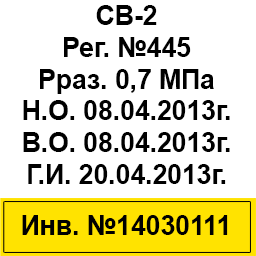
<style>
.page{position:relative;width:256px;height:256px;background:#ffffff}
.page>*{position:absolute;margin:0}
.t1{font:26.5px "Arial-BoldMT";color:#000000}
</style>
<div class="page">
<p class="t1" style="left:23px;top:5px;width:207px;height:179px;text-align:center">СВ-2<br>Рег. №445<br>Рраз. 0,7 МПа<br>Н.О. 08.04.2013г.<br>В.О. 08.04.2013г.<br>Г.И. 20.04.2013г.</p>
<p class="t1" style="left:22px;top:215px;width:206px;height:20px">Инв. №14030111</p>
</div>
